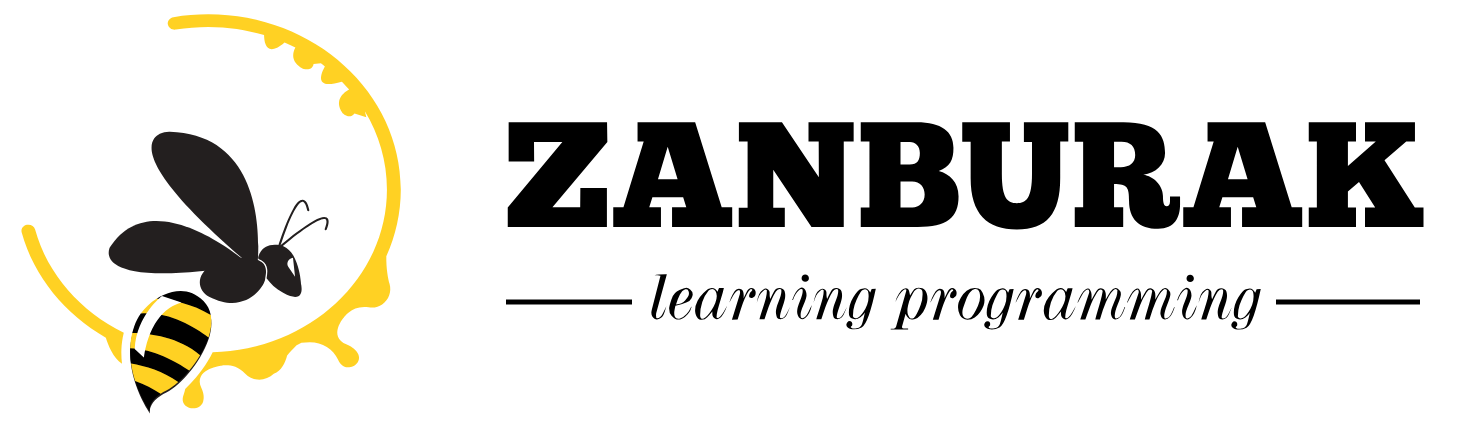
<style>
.page{position:relative;width:1464px;height:428px;background:#ffffff}
.page>*{position:absolute;margin:0}
.t1{font:150px "ChunkFive-Regular";color:#000000}
.t2{font:74px "Dubiel-Italic";color:#000000}
</style>
<div class="page">
<p class="t1" style="left:507px;top:122px;width:917px;height:108px">ZANBURAK</p>
<p class="t2" style="left:651px;top:274px;width:610px;height:56px">learning programming</p>
</div>
